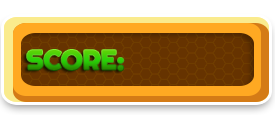
<style>
.page{position:relative;width:275px;height:115px}
.page>*{position:absolute;margin:0}
.t1{font:26.7px "Righteous-Regular";font-weight:bold}
</style>
<div class="page">
<p class="t1" style="left:27px;top:50px;width:97px;height:21px">SCORE:</p>
</div>
